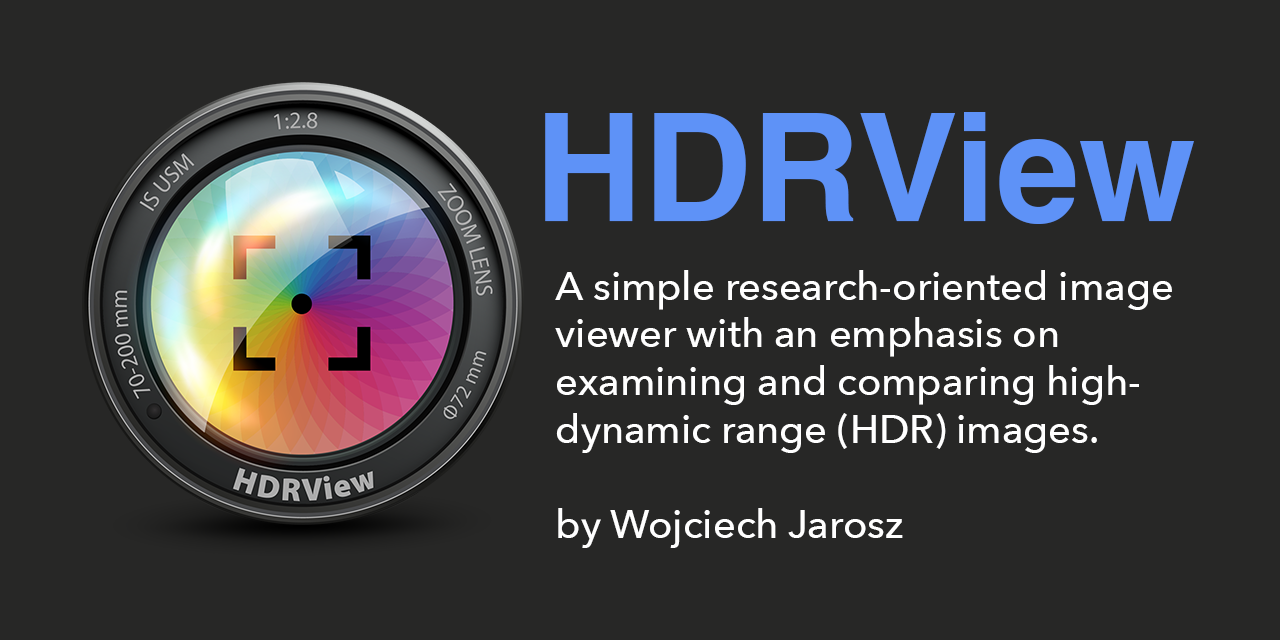
<style>
.page{position:relative;width:1280px;height:640px;background:#272726}
.page>*{position:absolute;margin:0}
.t1{font:150px "Helvetica-Bold";color:#5e92f7}
.t2{font:39.8px "AvenirNext-Medium";color:#ffffff}
</style>
<div class="page">
<p class="t1" style="left:545px;top:112px;width:649px;height:112px">HDRView</p>
<p class="t2" style="left:555px;top:270px;width:617px;height:278px">A simple research-oriented image<br>viewer with an emphasis on<br>examining and comparing high-<br>dynamic range (HDR) images.<br><br>by Wojciech Jarosz</p>
</div>
